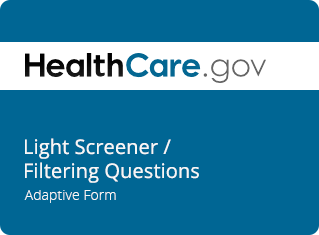
<style>
.page{position:relative;width:319px;height:235px;background:#006694}
.page>*{position:absolute;margin:0}
.t1{font:20px "OpenSans";letter-spacing:0.005em;color:#f7f7f7}
.t2{font:14px "OpenSans-Light";letter-spacing:0.005em;color:#f7f7f7}
</style>
<div class="page">
<p class="t1" style="left:25px;top:138px;width:174px;height:45px">Light Screener / <br>Filtering Questions</p>
<p class="t2" style="left:24px;top:190px;width:92px;height:13px">Adaptive Form</p>
</div>
